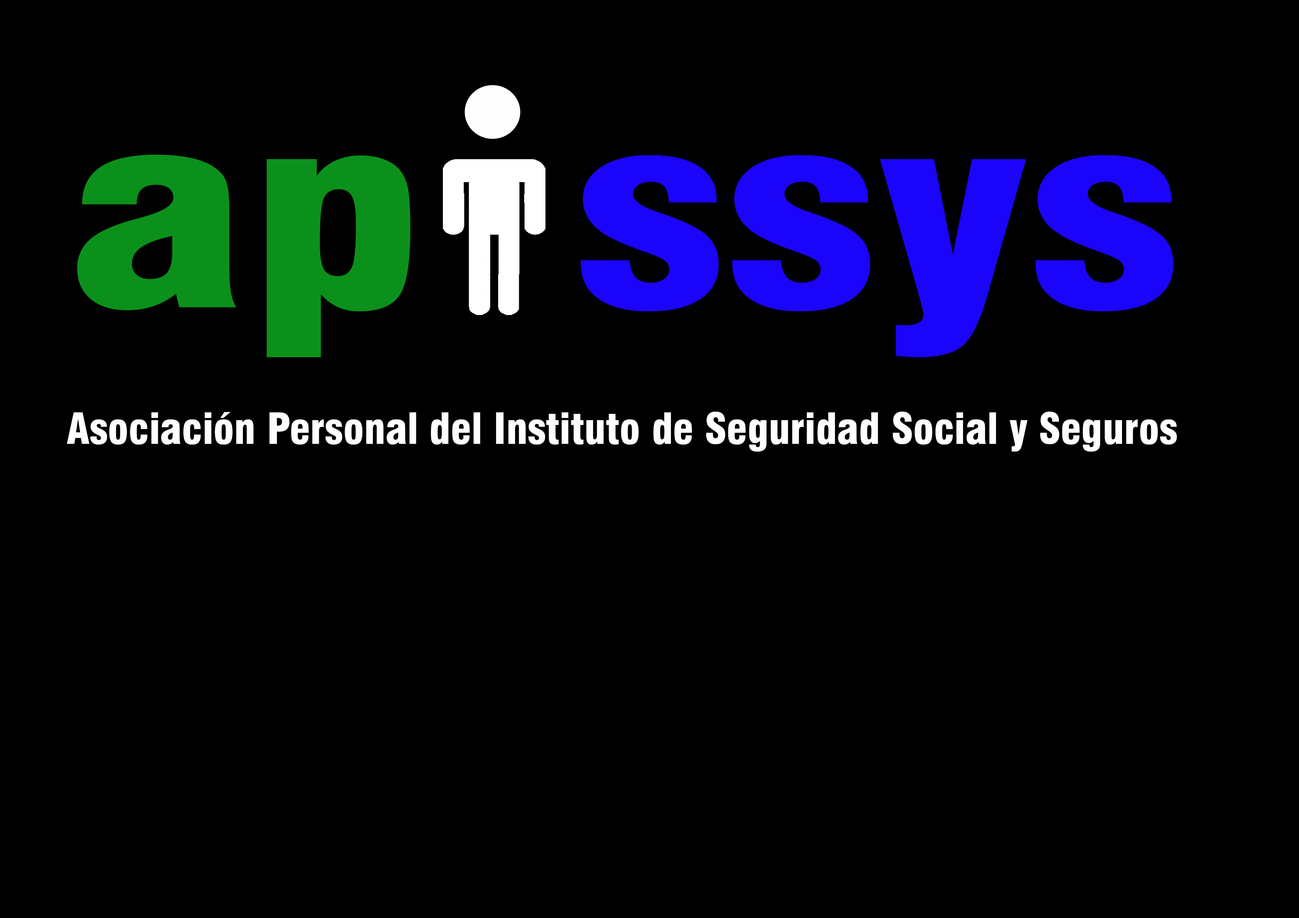
<style>
.page{position:relative;width:1299px;height:918px;background:#000000}
.page>*{position:absolute;margin:0}
.t1{font:262.2px "Swiss721BT-BlackCondensed";color:#0b911b;scale:1.32 1}
.t2{font:262.2px "Swiss721BT-BlackCondensed";color:#1b04fa;scale:1.32 1}
.t3{font:262.2px "Swiss721BT-BlackCondensed";color:#fefefe;scale:1.32 1}
.t4{font:41.6px "Swiss721BT-BlackCondensed";color:#fefefe}
</style>
<div class="page">
<p class="t1" style="left:77px;top:154px;width:333px;height:203px">ap</p>
<p class="t2" style="left:581px;top:155px;width:592px;height:202px"><span class="t3">      </span>ssys</p>
<p class="t4" style="left:67px;top:412px;width:1110px;height:40px">Asociación Personal del Instituto de Seguridad Social y Seguros</p>
</div>
